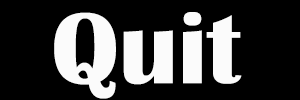
<style>
.page{position:relative;width:300px;height:100px;background:#000000}
.page>*{position:absolute;margin:0}
.t1{font:104.2px "BritannicBold";color:#fcfcfc}
</style>
<div class="page">
<p class="t1" style="left:54px;top:12px;width:188px;height:87px">Quit</p>
</div>
